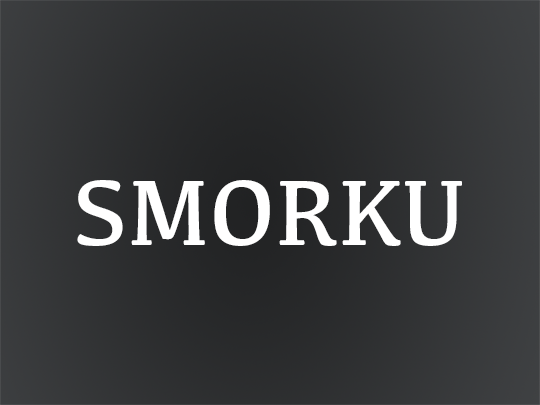
<style>
.page{position:relative;width:540px;height:405px}
.page>*{position:absolute;margin:0}
.t1{font:96px "Kefa-Regular";color:#ffffff}
</style>
<div class="page">
<p class="t1" style="left:77px;top:180px;width:385px;height:66px">SMORKU</p>
</div>
